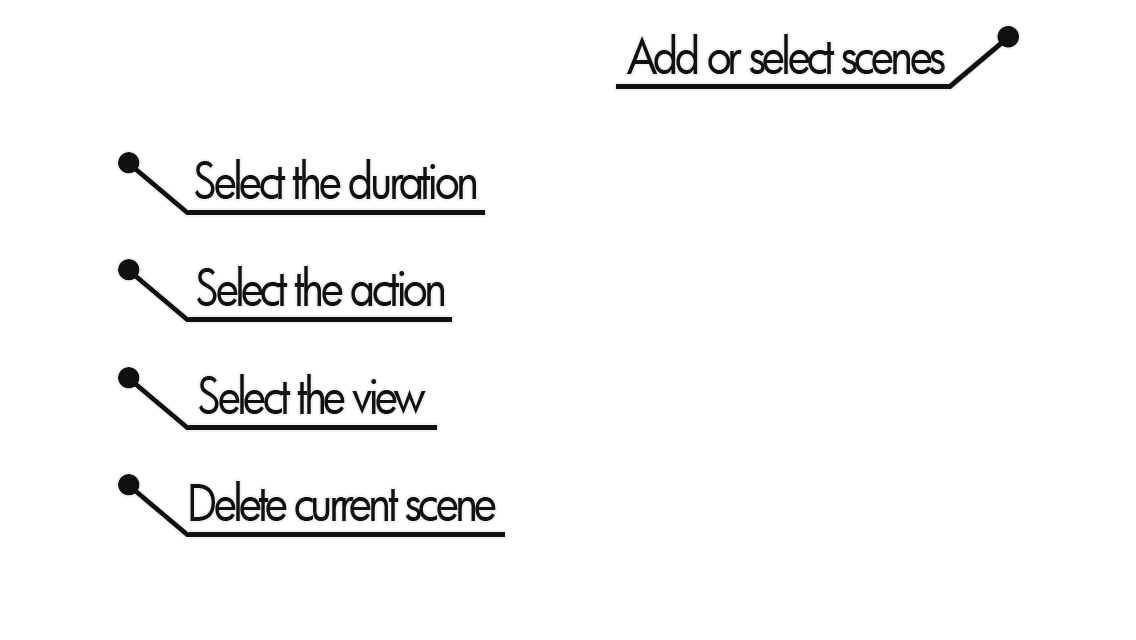
<style>
.page{position:relative;width:1136px;height:640px;background:#ffffff}
.page>*{position:absolute;margin:0}
.t1{font:48.9px "Futura-Book";letter-spacing:-0.08em;color:#111111;scale:0.89 1}
</style>
<div class="page">
<p class="t1" style="left:626px;top:34px;width:319px;height:40px">Add or select scenes</p>
<p class="t1" style="left:195px;top:159px;width:281px;height:40px">Select the duration</p>
<p class="t1" style="left:197px;top:266px;width:247px;height:40px">Select the action</p>
<p class="t1" style="left:199px;top:374px;width:227px;height:40px">Select the view</p>
<p class="t1" style="left:190px;top:481px;width:306px;height:40px">Delete current scene</p>
</div>
